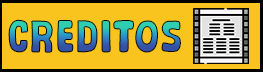
<style>
.page{position:relative;width:263px;height:72px;background:#f9c41e}
.page>*{position:absolute;margin:0}
.t1{font:42.9px "Chatlong"}
</style>
<div class="page">
<p class="t1" style="left:8px;top:19px;width:173px;height:34px">CREDITOS</p>
</div>
